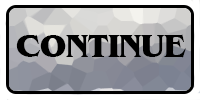
<style>
.page{position:relative;width:200px;height:100px}
.page>*{position:absolute;margin:0}
.t1{font:33.3px "AGBenguiatCyrBoldBold";color:#000000}
</style>
<div class="page">
<p class="t1" style="left:16px;top:34px;width:170px;height:24px">CONTINUE</p>
</div>
